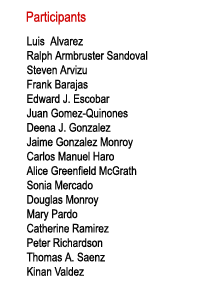
<style>
.page{position:relative;width:200px;height:300px;background:#ffffff}
.page>*{position:absolute;margin:0}
.t1{font:14px "ArialNarrow";color:#d00707}
.t2{font:12px "ArialNarrow";color:#050505}
</style>
<div class="page">
<p class="t1" style="left:26px;top:11px;width:60px;height:14px">Participants</p>
<p class="t2" style="left:26px;top:36px;width:122px;height:240px">Luis  Alvarez<br>Ralph Armbruster Sandoval<br>Steven Arvizu<br>Frank Barajas<br>Edward J. Escobar<br>Juan Gomez-Quinones<br>Deena J. Gonzalez<br>Jaime Gonzalez Monroy<br>Carlos Manuel Haro<br>Alice Greenfield McGrath<br>Sonia Mercado<br>Douglas Monroy<br>Mary Pardo<br>Catherine Ramirez<br>Peter Richardson<br>Thomas A. Saenz<br>Kinan Valdez</p>
</div>
